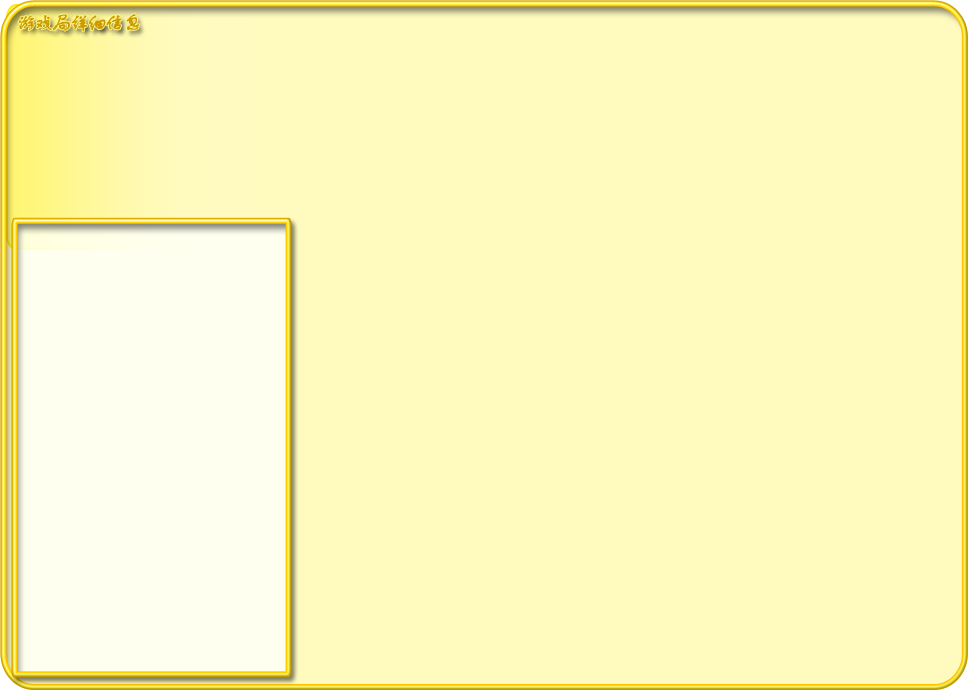
<style>
.page{position:relative;width:968px;height:691px;background:#fffbbf}
.page>*{position:absolute;margin:0}
.t1{font:20px "FZSTK--GBK1-0";letter-spacing:-0.14em;color:#cc9900;font-weight:bold}
</style>
<div class="page">
<p class="t1" style="left:18px;top:14px;width:122px;height:18px">游戏局详细信息</p>
</div>
